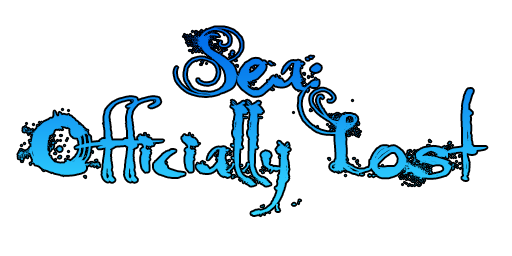
<style>
.page{position:relative;width:512px;height:256px;background:#ffffff}
.page>*{position:absolute;margin:0}
.t1{font:72px "MoonlightShadow";letter-spacing:0.025em;color:#21b3f8}
</style>
<div class="page">
<p class="t1" style="left:18px;top:27px;width:469px;height:189px;text-align:center">Sea:<br>Officially Lost</p>
</div>
